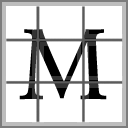
<style>
.page{position:relative;width:128px;height:128px;background:#ffffff}
.page>*{position:absolute;margin:0}
.t1{font:100.3px "IowanOldStyle-Roman"}
</style>
<div class="page">
<p class="t1" style="left:19px;top:29px;width:88px;height:71px">M</p>
</div>
